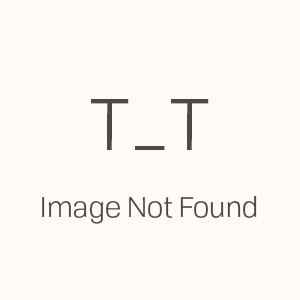
<style>
.page{position:relative;width:300px;height:300px;background:#fdfaf7}
.page>*{position:absolute;margin:0}
.t1{font:28px "TofinoPersonal-Book";color:#4a4a4a}
.t2{font:72px "TofinoPersonal-Book";color:#4a4a4a}
</style>
<div class="page">
<p class="t1" style="left:42px;top:99px;width:215px;height:125px;text-align:center"><span class="t2">T_T<br></span><br>Image Not Found</p>
</div>
